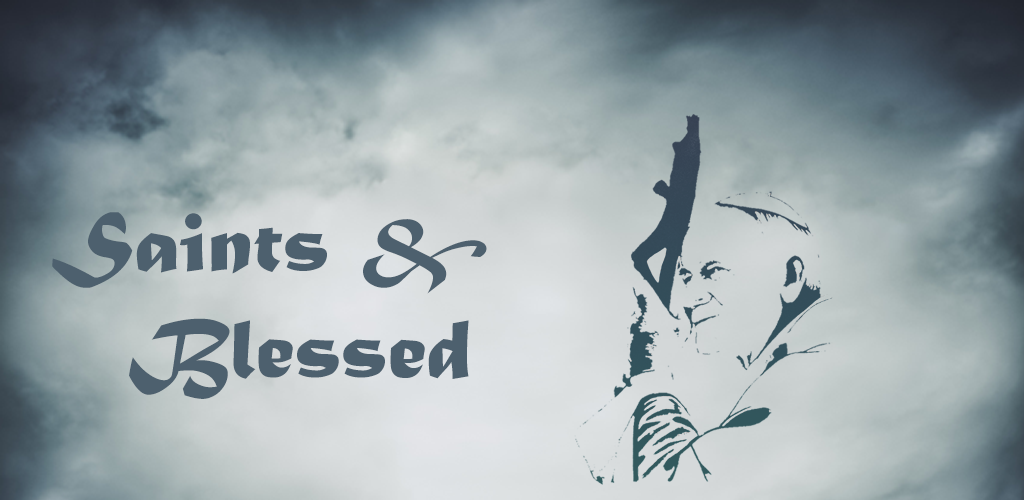
<style>
.page{position:relative;width:1024px;height:500px}
.page>*{position:absolute;margin:0}
.t1{font:88.3px "MaturaMTScriptCapitals";color:#4d606e;scale:1.06 1}
</style>
<div class="page">
<p class="t1" style="left:52px;top:212px;width:435px;height:187px;text-align:center">Saints &amp;<br>  Blessed</p>
</div>
